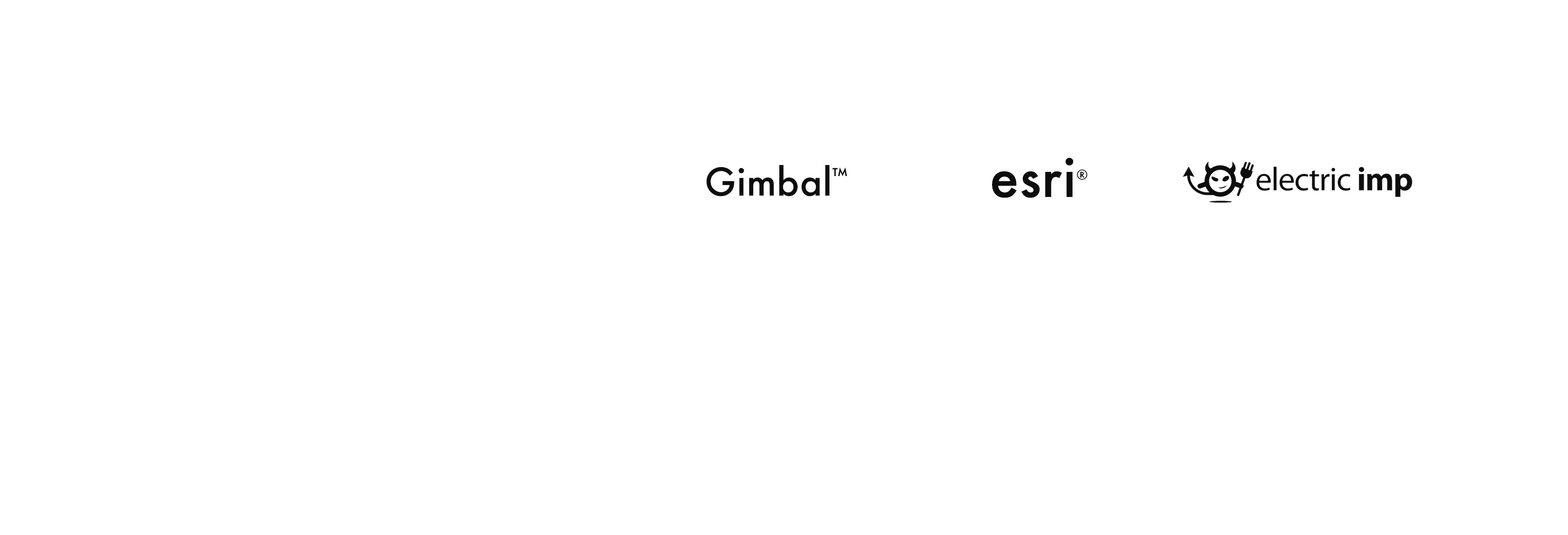
<style>
.page{position:relative;width:1568px;height:535px;background:#ffffff}
.page>*{position:absolute;margin:0}
.t1{font:52.6px "Futura-Medium";letter-spacing:0.01em;color:#0d0d0d}
.t2{font:12.9px "Futura-Medium";letter-spacing:0.01em;color:#0d0d0d}
.t3{font:37.3px "Futura-Medium";letter-spacing:0.01em;color:#0d0d0d}
.t4{font:18.8px "Futura-Medium";letter-spacing:0.01em;color:#0d0d0d}
</style>
<div class="page">
<p class="t1" style="left:992px;top:158px;width:96px;height:40px">esri<span class="t2">®</span></p>
<p class="t3" style="left:706px;top:165px;width:141px;height:32px">Gimbal<span class="t4">™</span></p>
</div>
